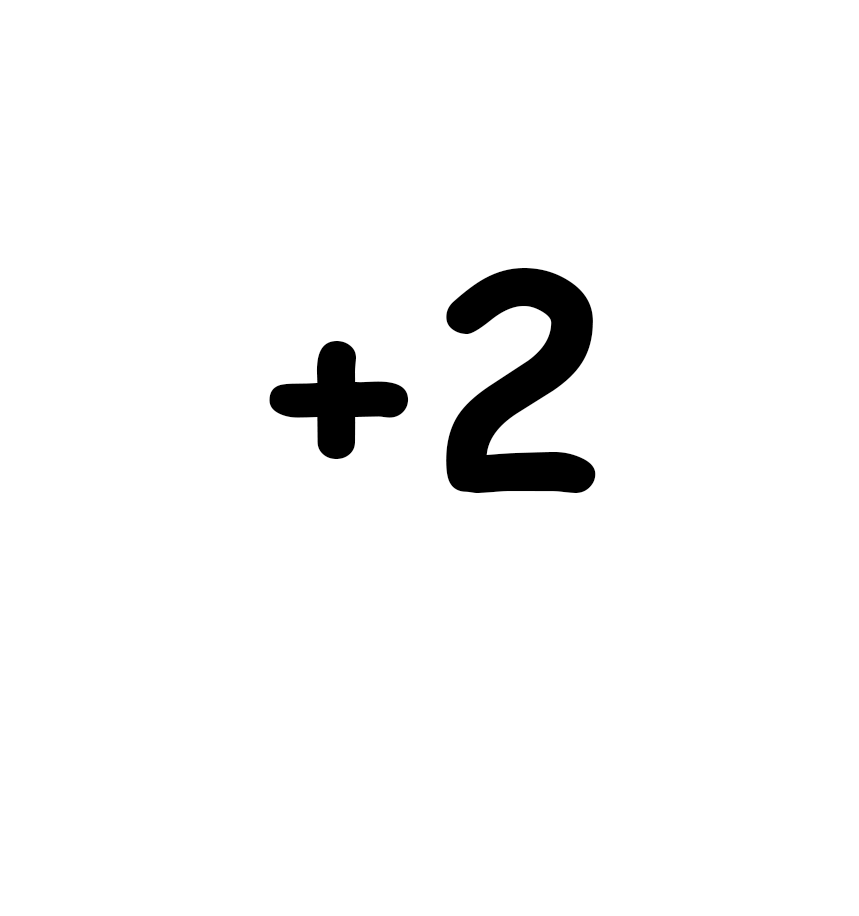
<style>
.page{position:relative;width:859px;height:916px;background:#ffffff}
.page>*{position:absolute;margin:0}
.t1{font:300px "ComicSansMS-Bold";color:#000000;font-variant:small-caps}
</style>
<div class="page">
<p class="t1" style="left:269px;top:268px;width:327px;height:225px">+2</p>
</div>
